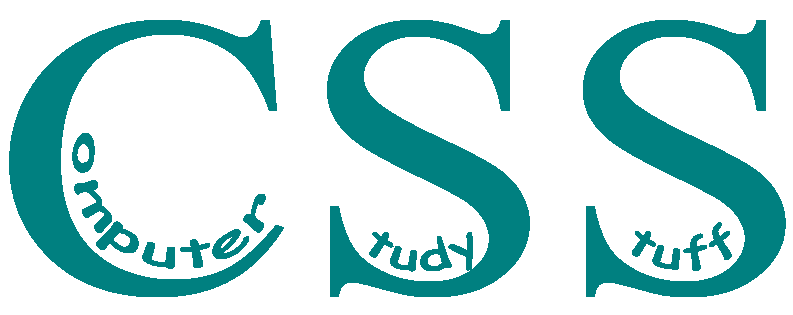
<style>
.page{position:relative;width:793px;height:315px;background:#ffffff}
.page>*{position:absolute;margin:0}
.t1{font:400px "TimesNewRomanPSMT";color:#008080;scale:1.15 1}
.t2{font:40px "ComicSansMS";color:#008080;scale:0.9 1}
</style>
<div class="page">
<p class="t1" style="left:9px;top:20px;width:777px;height:277px">CSS</p>
<p class="t2" style="left:72px;top:133px;width:194px;height:136px;rotate:19deg">omputer</p>
<p class="t2" style="left:632px;top:222px;width:100px;height:49px">tuff</p>
<p class="t2" style="left:369px;top:232px;width:104px;height:40px">tudy</p>
</div>
